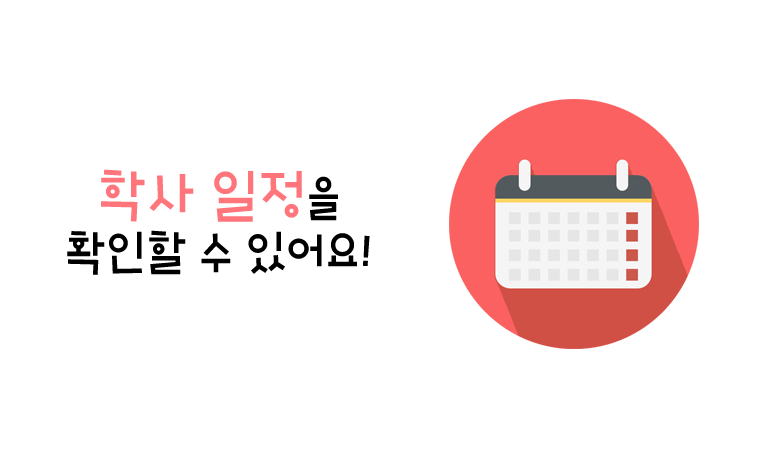
<style>
.page{position:relative;width:765px;height:454px;background:#ffffff}
.page>*{position:absolute;margin:0}
.t1{font:45px "HoonJungleR";color:#000000}
.t2{font:54px "HoonJungleR";color:#ff757c}
</style>
<div class="page">
<p class="t1" style="left:67px;top:169px;width:303px;height:106px;text-align:center"><span class="t2"><br>학사 일정</span>을 <br>확인할 수 있어요!</p>
</div>
